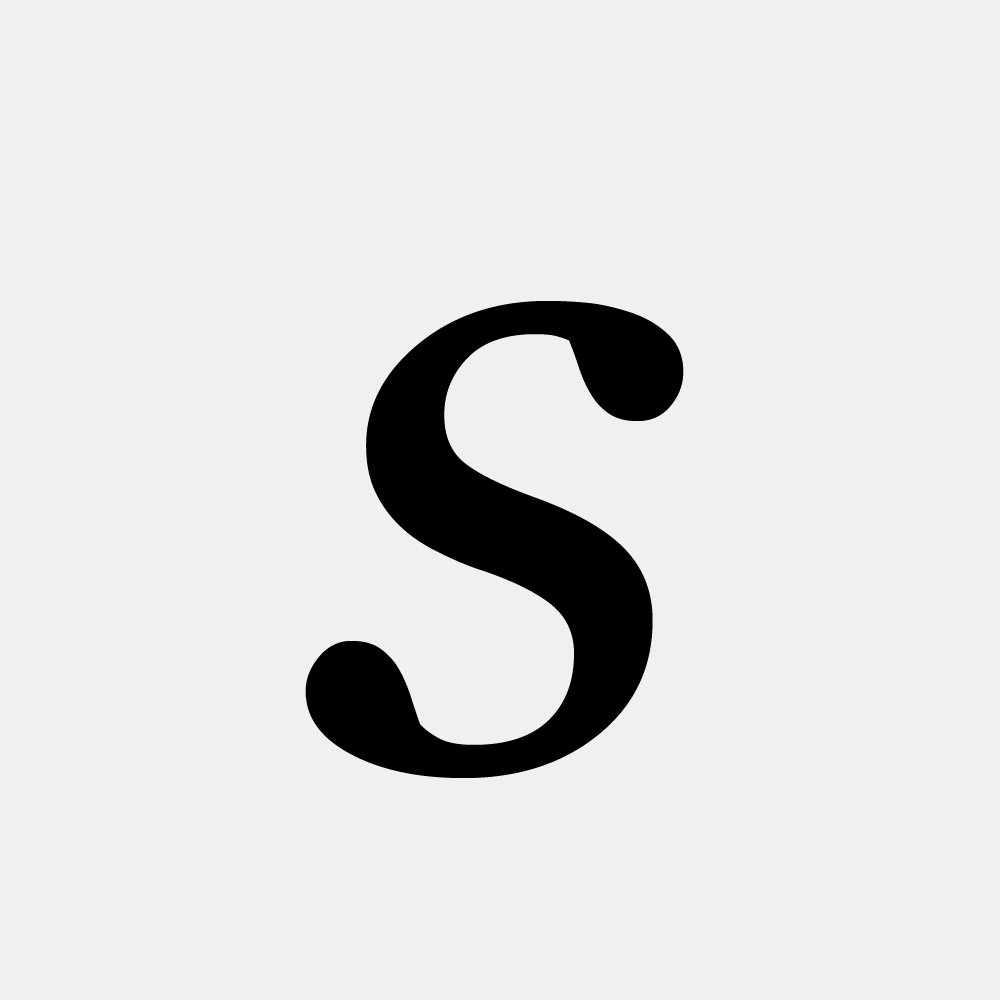
<style>
.page{position:relative;width:1000px;height:1000px;background:#f0f0f0}
.page>*{position:absolute;margin:0}
.t1{font:937.5px "Georgia-Italic";color:#000000}
</style>
<div class="page">
<p class="t1" style="left:305px;top:301px;width:379px;height:477px">s</p>
</div>
